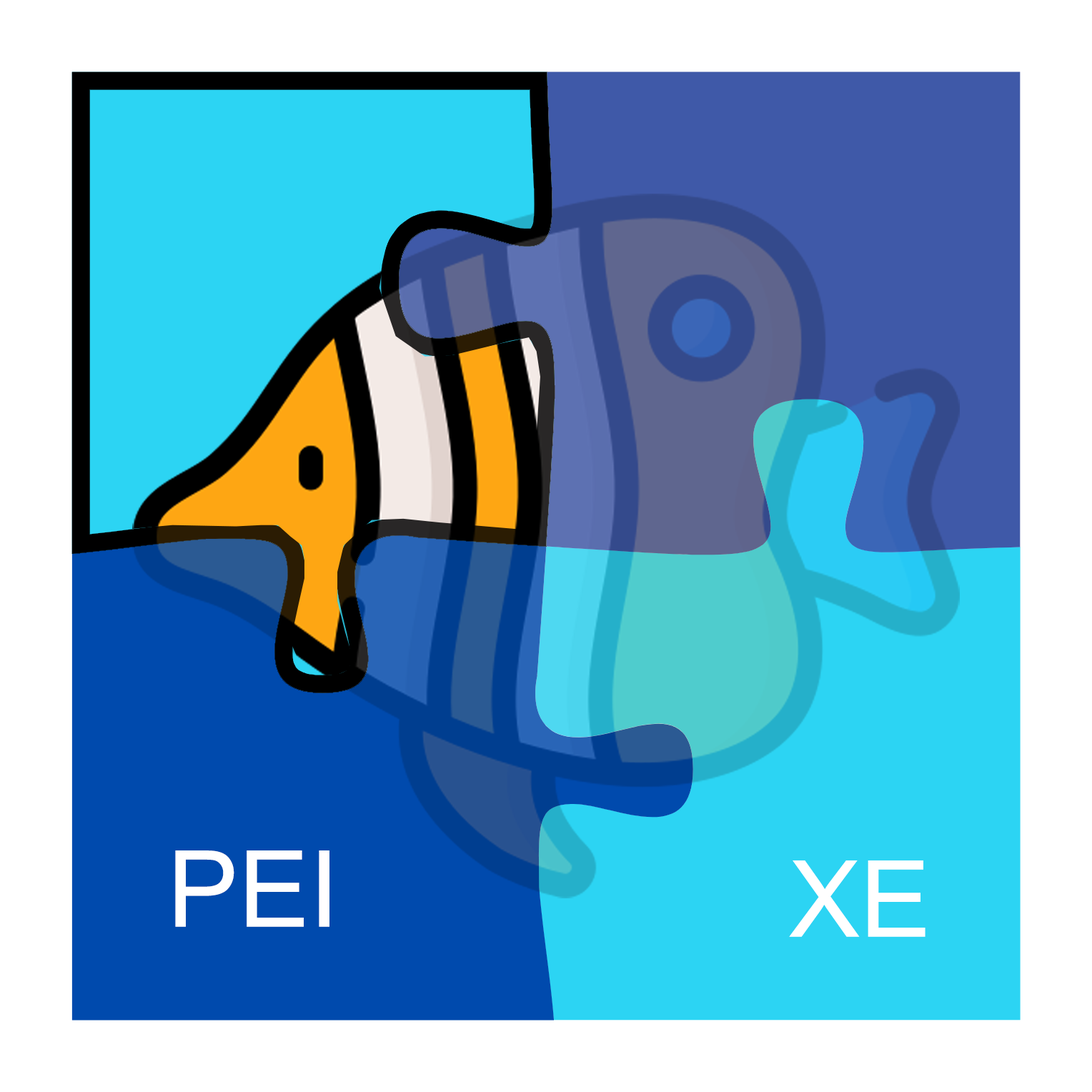
<style>
.page{position:relative;width:1092px;height:1092px;background:#ffffff}
.page>*{position:absolute;margin:0}
.t1{font:106.4px "ArialMT";color:#ffffff}
</style>
<div class="page">
<p class="t1" style="left:175px;top:850px;width:154px;height:77px">PEI</p>
<p class="t1" style="left:789px;top:860px;width:136px;height:77px">XE</p>
</div>
